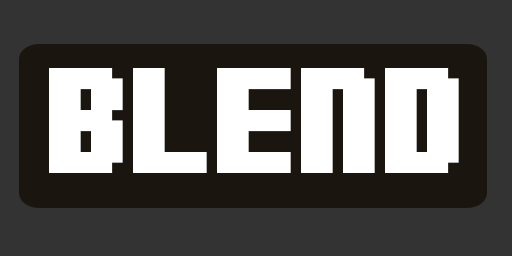
<style>
.page{position:relative;width:512px;height:256px;background:#333333}
.page>*{position:absolute;margin:0}
.t1{font:168.1px "Blocktopia";color:#ffffff}
</style>
<div class="page">
<p class="t1" style="left:49px;top:68px;width:410px;height:105px">BLEND</p>
</div>
